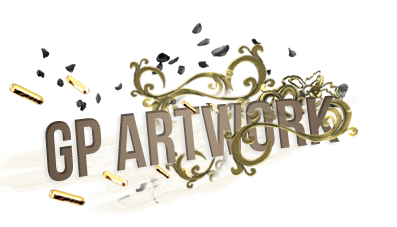
<style>
.page{position:relative;width:397px;height:227px;background:#ffffff}
.page>*{position:absolute;margin:0}
.t1{font:75.2px "BebasNeue"}
</style>
<div class="page">
<p class="t1" style="left:45px;top:95px;width:295px;height:87px;rotate:-7deg">GP ARTWORK</p>
</div>
